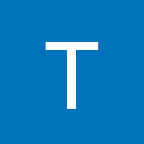
<style>
.page{position:relative;width:144px;height:144px;background:#0072bc}
.page>*{position:absolute;margin:0}
.t1{font:93.4px "TrebuchetMS";color:#ffffff}
</style>
<div class="page">
<p class="t1" style="left:45px;top:42px;width:54px;height:67px">T</p>
</div>
